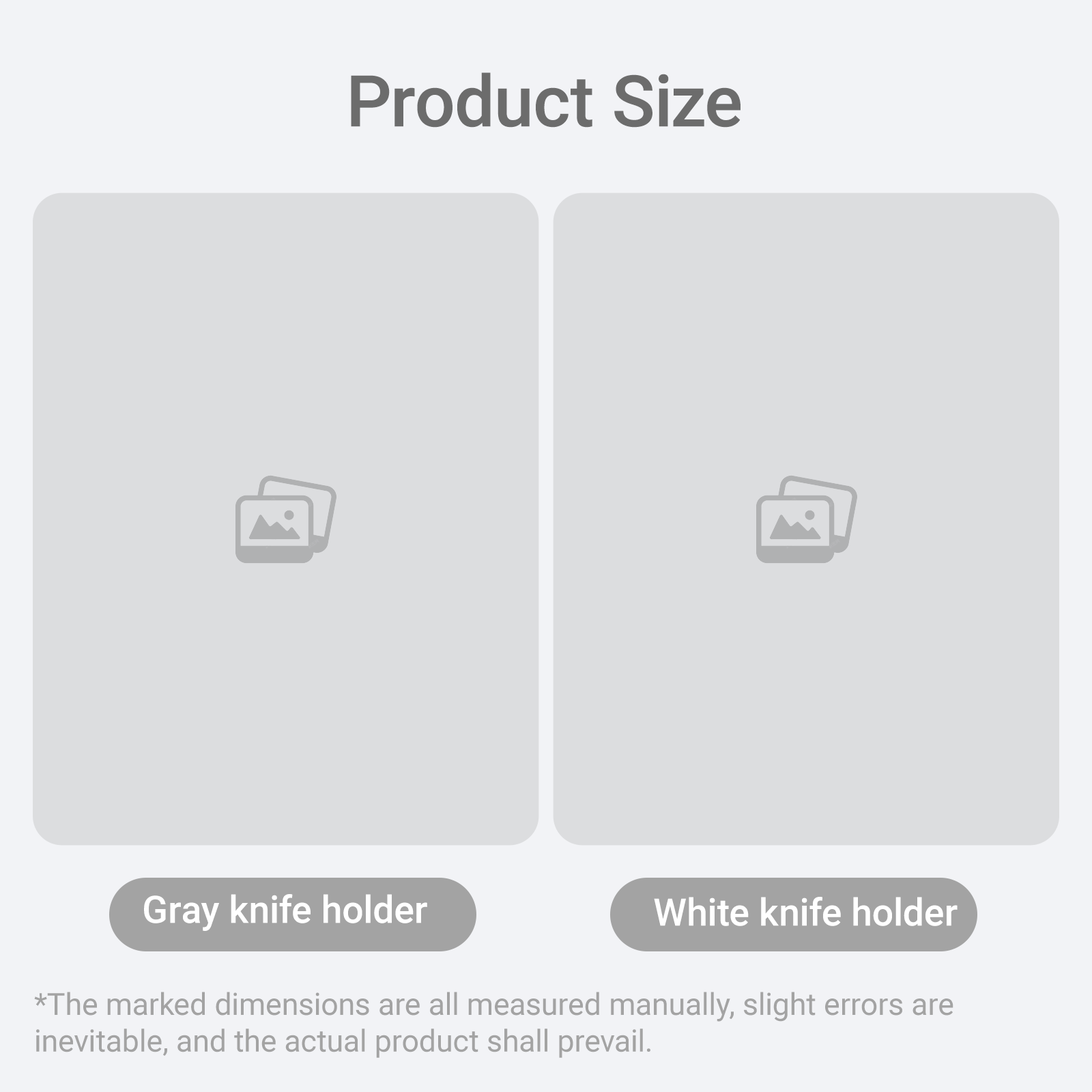
<style>
.page{position:relative;width:1092px;height:1092px;background:#dcdddf}
.page>*{position:absolute;margin:0}
.t1{font:71.3px "Roboto-Medium";color:#6c6c6c}
.t2{font:37.9px "Roboto-Medium";color:#ffffff}
.t3{font:30.6px "Roboto-Regular";color:#a3a3a3}
</style>
<div class="page">
<p class="t1" style="left:351px;top:72px;width:390px;height:56px">Product Size</p>
<p class="t2" style="left:144px;top:894px;width:283px;height:37px">Gray knife holder</p>
<p class="t2" style="left:654px;top:897px;width:304px;height:29px">White knife holder</p>
<p class="t3" style="left:34px;top:992px;width:919px;height:66px">*The marked dimensions are all measured manually, slight errors are inevitable, and the actual product shall prevail.</p>
</div>
